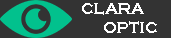
<style>
.page{position:relative;width:171px;height:38px;background:#333333}
.page>*{position:absolute;margin:0}
.t1{font:16px "CopperplateGothic-Bold";color:#ffffff}
</style>
<div class="page">
<p class="t1" style="left:82px;top:3px;width:75px;height:30px;text-align:center">CLARA<br>         OPTIC</p>
</div>
